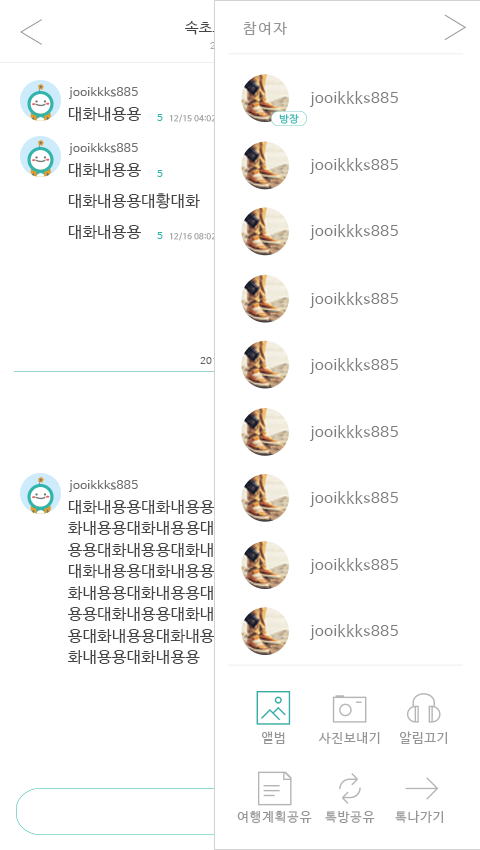
<style>
.page{position:relative;width:480px;height:850px;background:#ffffff}
.page>*{position:absolute;margin:0}
.t1{font:15px "NanumBarunGothic";letter-spacing:0.025em}
.t2{font:15.4px "NanumBarunGothic";letter-spacing:0.1em;color:#959595}
.t3{font:12px "NanumBarunGothic";letter-spacing:0.025em;color:#707070}
.t4{font:15.4px "NanumBarunGothic";letter-spacing:0.025em;color:#7d7d7d}
.t5{font:16px "NanumBarunGothic";letter-spacing:0.025em;color:#434343}
.t6{font:10px "NanumBarunGothic";letter-spacing:0.025em;color:#25b7aa}
.t7{font:8px "NanumBarunGothic";letter-spacing:0.025em;color:#a0a0a0}
.t8{font:16px/21.5px "NanumBarunGothic";letter-spacing:0.025em;color:#434343}
.t9{font:12.6px "NanumBarunGothic";letter-spacing:0.1em;color:#959595}
</style>
<div class="page">
<p class="t1" style="left:185px;top:20px;width:111px;height:15px">속초로 포켓몬 고?</p>
<p class="t2" style="left:243px;top:21px;width:44px;height:14px">참여자</p>
<p class="t3" style="left:69px;top:87px;width:69px;height:12px">jooikkks885</p>
<p class="t4" style="left:310px;top:91px;width:88px;height:16px">jooikkks885</p>
<p class="t5" style="left:68px;top:107px;width:73px;height:14px">대화내용용</p>
<p class="t6" style="left:157px;top:114px;width:6px;height:7px">5</p>
<p class="t7" style="left:169px;top:114px;width:47px;height:9px">12/15 04:02</p>
<p class="t3" style="left:69px;top:143px;width:69px;height:12px">jooikkks885</p>
<p class="t4" style="left:310px;top:158px;width:88px;height:16px">jooikkks885</p>
<p class="t5" style="left:68px;top:163px;width:73px;height:14px">대화내용용</p>
<p class="t6" style="left:157px;top:170px;width:6px;height:7px">5</p>
<p class="t5" style="left:68px;top:193px;width:132px;height:16px">대화내용용대황대화</p>
<p class="t5" style="left:68px;top:225px;width:73px;height:14px">대화내용용</p>
<p class="t6" style="left:157px;top:232px;width:6px;height:7px">5</p>
<p class="t7" style="left:169px;top:232px;width:47px;height:9px">12/16 08:02</p>
<p class="t4" style="left:310px;top:224px;width:88px;height:16px">jooikkks885</p>
<p class="t4" style="left:310px;top:292px;width:88px;height:16px">jooikkks885</p>
<p class="t4" style="left:310px;top:358px;width:88px;height:16px">jooikkks885</p>
<p class="t4" style="left:310px;top:425px;width:88px;height:16px">jooikkks885</p>
<p class="t3" style="left:69px;top:480px;width:69px;height:12px">jooikkks885</p>
<p class="t4" style="left:310px;top:491px;width:88px;height:16px">jooikkks885</p>
<p class="t8" style="left:68px;top:500px;width:249px;height:164px">대화내용용대화내용용대화내용용대<br>화내용용대화내용용대화내용용대화내<br>용용대화내용용대화내용용대화내용용<br>대화내용용대화내용용대화내용용대<br>화내용용대화내용용대화내용용대화내<br>용용대화내용용대화내용용대화내용<br>용대화내용용대화내용용대화내용용대<br>화내용용대화내용용</p>
<p class="t4" style="left:310px;top:558px;width:88px;height:16px">jooikkks885</p>
<p class="t4" style="left:310px;top:624px;width:88px;height:16px">jooikkks885</p>
<p class="t9" style="left:262px;top:731px;width:23px;height:13px">앨범</p>
<p class="t9" style="left:318px;top:732px;width:62px;height:12px">사진보내기</p>
<p class="t9" style="left:399px;top:731px;width:48px;height:13px">알림끄기</p>
<p class="t9" style="left:237px;top:810px;width:75px;height:14px">여행계획공유</p>
<p class="t9" style="left:325px;top:811px;width:50px;height:12px">톡방공유</p>
<p class="t9" style="left:395px;top:810px;width:48px;height:13px">톡나가기</p>
</div>
